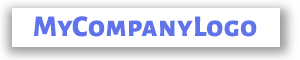
<style>
.page{position:relative;width:300px;height:60px;background:#ffffff}
.page>*{position:absolute;margin:0}
.t1{font:30px "AlegreyaSansSC-ExtraBold";letter-spacing:0.025em;color:#5f73ea}
</style>
<div class="page">
<p class="t1" style="left:34px;top:16px;width:223px;height:21px">MyCompanyLogo</p>
</div>
